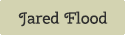
<style>
.page{position:relative;width:125px;height:35px;background:#d3d3b1}
.page>*{position:absolute;margin:0}
.t1{font:16px "CherrySwash-Regular";color:#303030}
</style>
<div class="page">
<p class="t1" style="left:18px;top:11px;width:90px;height:16px">Jared Flood</p>
</div>
